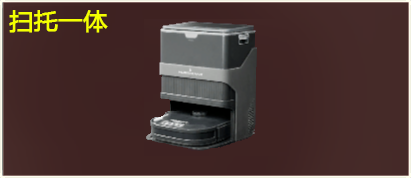
<style>
.page{position:relative;width:411px;height:178px}
.page>*{position:absolute;margin:0}
.t1{font:24px "MicrosoftYaHeiUI";color:#f4ff00;font-weight:bold}
</style>
<div class="page">
<p class="t1" style="left:9px;top:10px;width:99px;height:23px">扫托一体</p>
</div>
